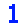
<style>
.page{position:relative;width:25px;height:25px;background:#ffffff}
.page>*{position:absolute;margin:0}
.t1{font:24px "Tahoma";color:#001eff;font-weight:bold}
</style>
<div class="page">
<p class="t1" style="left:9px;top:4px;width:9px;height:19px">1</p>
</div>
